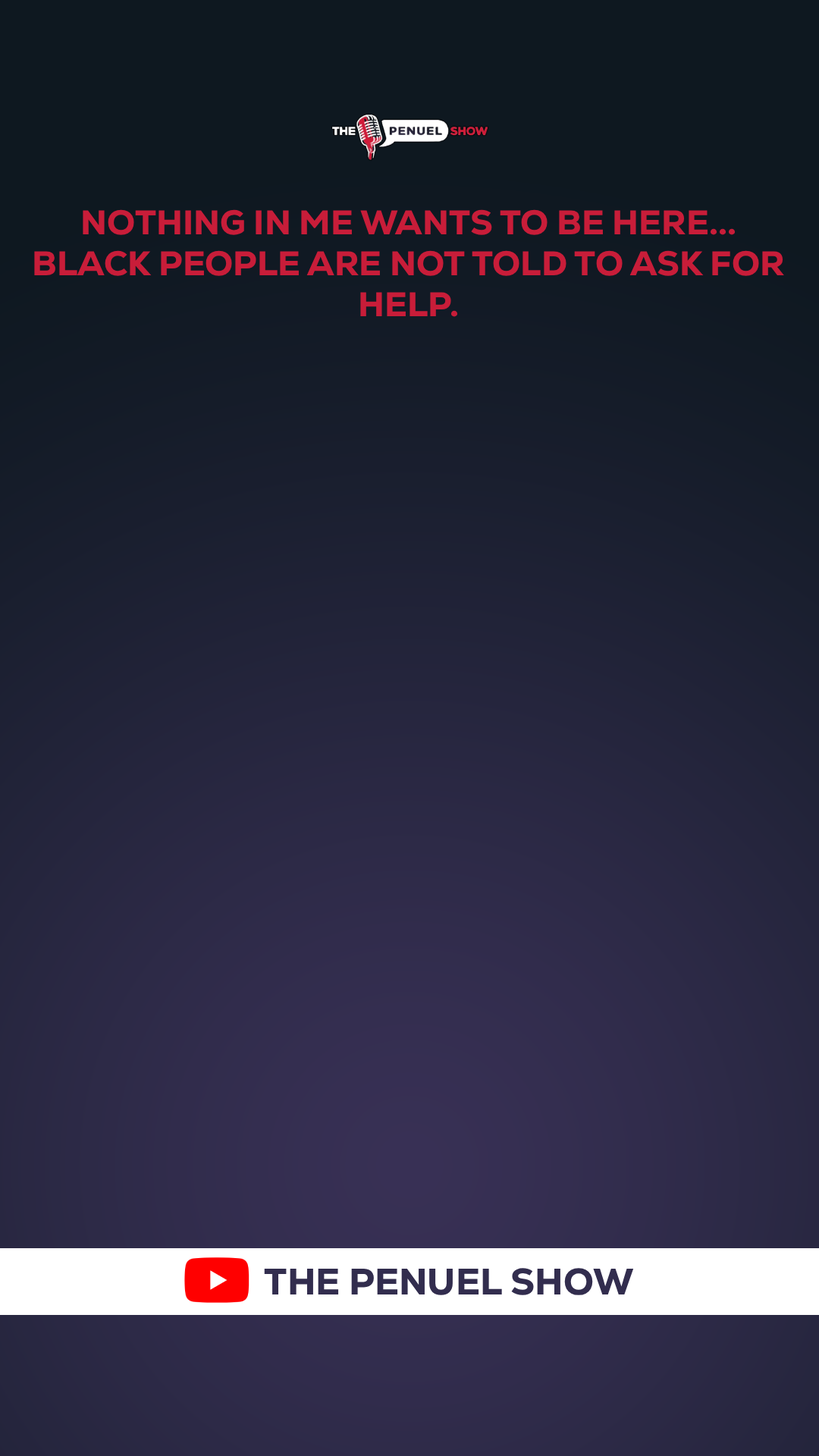
<style>
.page{position:relative;width:819px;height:1456px}
.page>*{position:absolute;margin:0}
.t1{font:34.1px "Nexa-Heavy";color:#c81d39;text-transform:uppercase}
</style>
<div class="page">
<p class="t1" style="left:34px;top:209px;width:750px;height:108px;text-align:center">Nothing in me wants to be here... Black people are not told to ask for help.</p>
</div>
